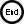
<style>
.page{position:relative;width:24px;height:24px;background:#ffffff}
.page>*{position:absolute;margin:0}
.t1{font:8px "ArialMT";color:#000000}
</style>
<div class="page">
<p class="t1" style="left:6px;top:9px;width:12px;height:6px">End</p>
</div>
